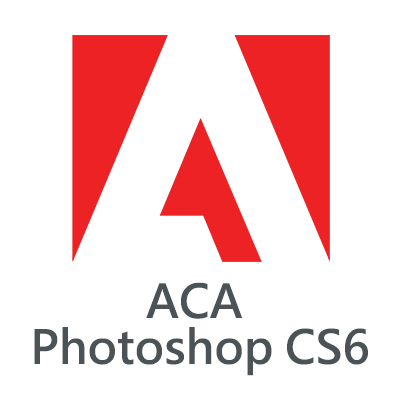
<style>
.page{position:relative;width:400px;height:400px;background:#ffffff}
.page>*{position:absolute;margin:0}
.t1{font:45.8px/45.8px "MicrosoftJhengHeiBold";color:#4b5357}
</style>
<div class="page">
<p class="t1" style="left:34px;top:282px;width:334px;height:94px;text-align:center">ACA <br>Photoshop CS6</p>
</div>
